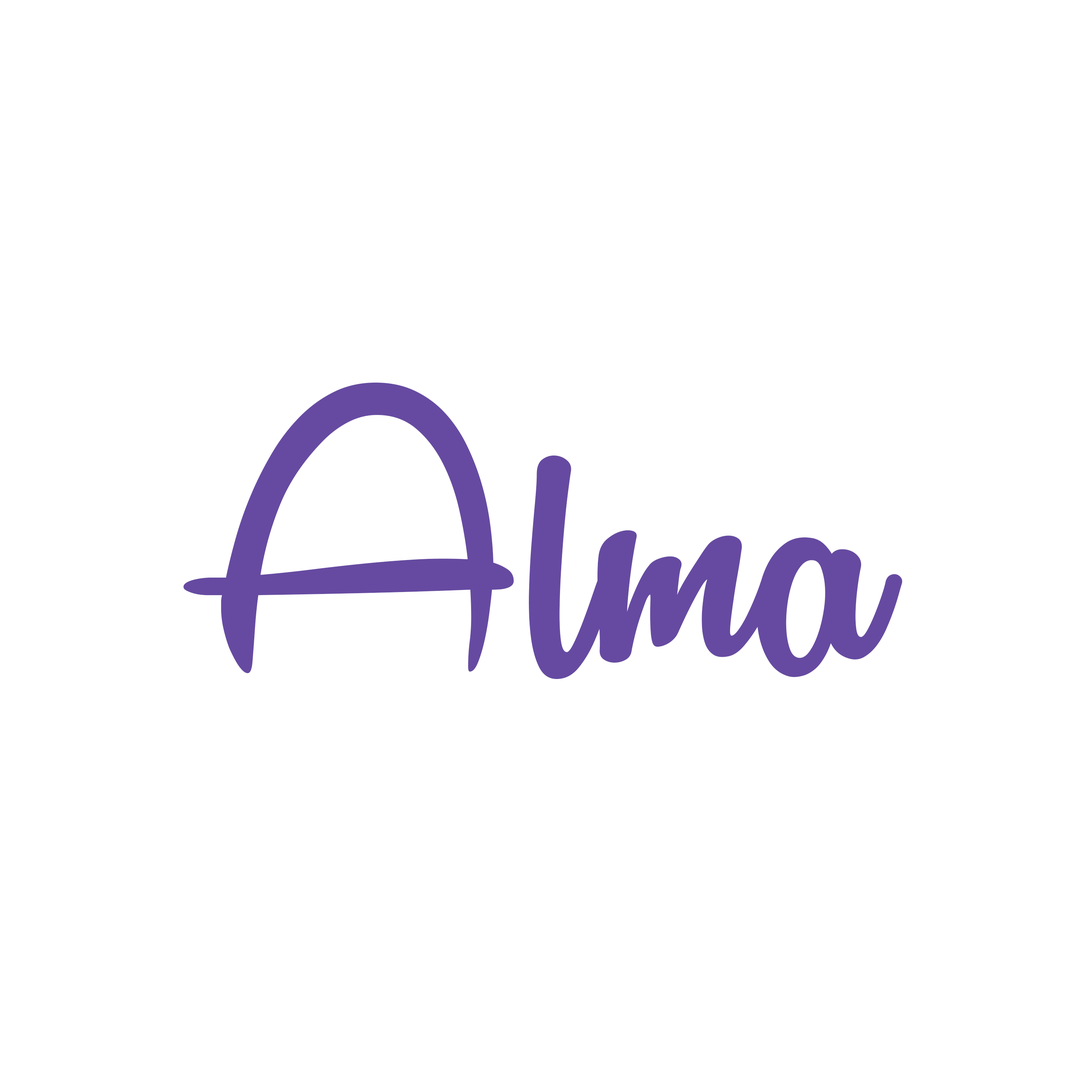
<style>
.page{position:relative;width:1092px;height:1092px;background:#ffffff}
.page>*{position:absolute;margin:0}
.t1{font:442.6px "RemachineScriptPersonalUse";color:#664aa1}
</style>
<div class="page">
<p class="t1" style="left:183px;top:383px;width:719px;height:296px">Alma</p>
</div>
